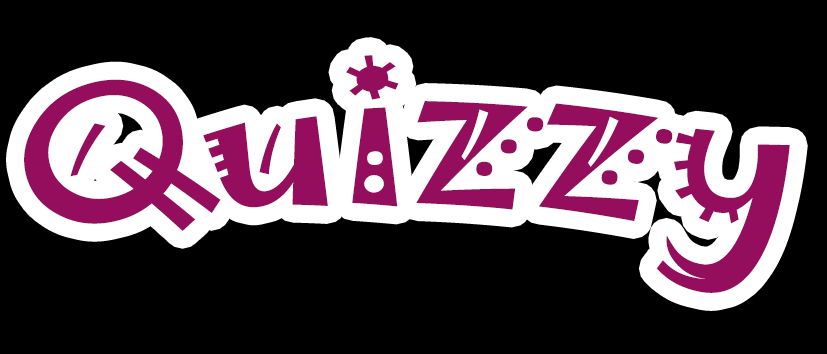
<style>
.page{position:relative;width:827px;height:354px;background:#000000}
.page>*{position:absolute;margin:0}
.t1{font:200px "Jokerman-Regular";color:#950d5d}
</style>
<div class="page">
<p class="t1" style="left:24px;top:55px;width:766px;height:238px">Quizzy</p>
</div>
